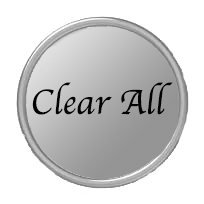
<style>
.page{position:relative;width:204px;height:204px;background:#ffffff}
.page>*{position:absolute;margin:0}
.t1{font:36px "Apple-Chancery";color:#020202}
</style>
<div class="page">
<p class="t1" style="left:32px;top:82px;width:141px;height:33px">Clear All</p>
</div>
